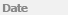
<style>
.page{position:relative;width:68px;height:15px;background:#f1f1f1}
.page>*{position:absolute;margin:0}
.t1{font:11px "Verdana-Bold";letter-spacing:-0.08em;color:#888888}
</style>
<div class="page">
<p class="t1" style="left:2px;top:4px;width:26px;height:8px">Date</p>
</div>
